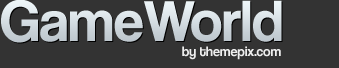
<style>
.page{position:relative;width:339px;height:68px;background:#333333}
.page>*{position:absolute;margin:0}
.t1{font:60px "CoolveticaRg-Regular";color:#d3dbe0}
.t2{font:14px "CoolveticaRg-Regular";color:#eeeeee}
</style>
<div class="page">
<p class="t1" style="left:1px;top:0px;width:281px;height:43px">GameWorld</p>
<p class="t2" style="left:182px;top:46px;width:99px;height:14px">by themepix.com</p>
</div>
